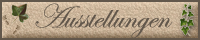
<style>
.page{position:relative;width:200px;height:40px}
.page>*{position:absolute;margin:0}
.t1{font:34px "EdwardianScriptITC";color:#62574b}
</style>
<div class="page">
<p class="t1" style="left:35px;top:3px;width:138px;height:36px">Ausstellungen</p>
</div>
